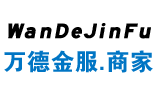
<style>
.page{position:relative;width:160px;height:90px;background:#ffffff}
.page>*{position:absolute;margin:0}
.t1{font:24px "STJTBZ";color:#000000;font-weight:bold;font-style:italic}
.t2{font:24px "FZDHTK--GBK1-0";color:#0075c4}
</style>
<div class="page">
<p class="t1" style="left:8px;top:23px;width:143px;height:16px">WanDeJinFu</p>
<p class="t2" style="left:4px;top:50px;width:149px;height:23px">万德金服.商家</p>
</div>
